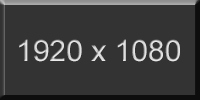
<style>
.page{position:relative;width:200px;height:100px;background:#333333}
.page>*{position:absolute;margin:0}
.t1{font:30px "ArialMT";color:#dddddd}
</style>
<div class="page">
<p class="t1" style="left:19px;top:39px;width:161px;height:23px">1920 x 1080</p>
</div>
